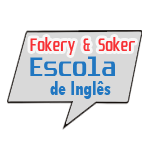
<style>
.page{position:relative;width:150px;height:150px;background:#ffffff}
.page>*{position:absolute;margin:0}
.t1{font:14.5px "Unispace-Bold";color:#f73034;scale:0.85 1}
.t2{font:21.9px "Unispace-Bold";color:#2177c1;scale:1.08 1}
.t3{font:21.1px "TwCenMT-CondensedExtraBold";color:#2177c1;scale:0.83 1}
</style>
<div class="page">
<p class="t1" style="left:30px;top:37px;width:105px;height:18px">Fokery &amp; Soker</p>
<p class="t2" style="left:30px;top:56px;width:85px;height:20px">Escola</p>
<p class="t3" style="left:50px;top:81px;width:61px;height:18px">de Inglês</p>
</div>
